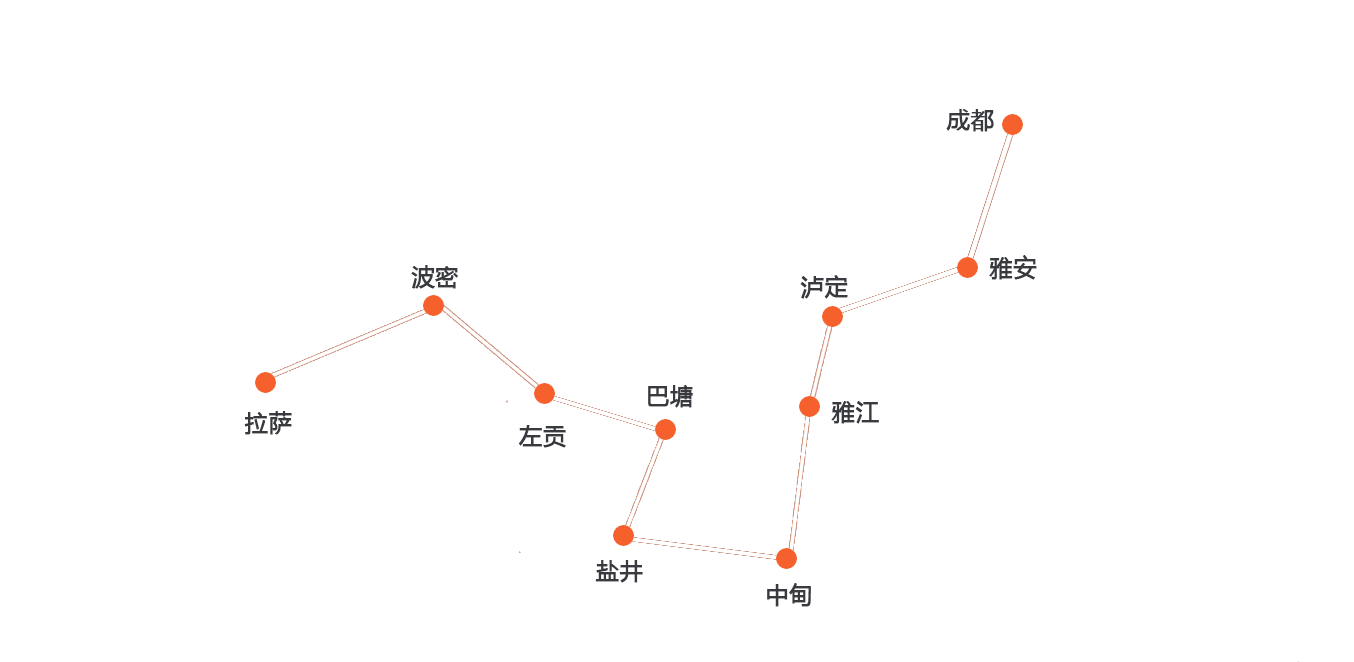
<style>
.page{position:relative;width:1354px;height:662px;background:#ffffff}
.page>*{position:absolute;margin:0}
.t1{font:40px "MicrosoftYaHei";color:#393a3f;font-weight:bold}
</style>
<div class="page">
<p class="t1" style="left:946px;top:109px;width:48px;height:23px">成都</p>
<p class="t1" style="left:989px;top:255px;width:48px;height:25px">雅安</p>
<p class="t1" style="left:411px;top:265px;width:47px;height:24px">波密</p>
<p class="t1" style="left:800px;top:275px;width:48px;height:24px">泸定</p>
<p class="t1" style="left:648px;top:385px;width:45px;height:23px">巴塘</p>
<p class="t1" style="left:831px;top:401px;width:48px;height:23px">雅江</p>
<p class="t1" style="left:244px;top:411px;width:48px;height:24px">拉萨</p>
<p class="t1" style="left:519px;top:425px;width:47px;height:23px">左贡</p>
<p class="t1" style="left:595px;top:560px;width:48px;height:23px">盐井</p>
<p class="t1" style="left:767px;top:583px;width:44px;height:24px">中甸</p>
</div>
